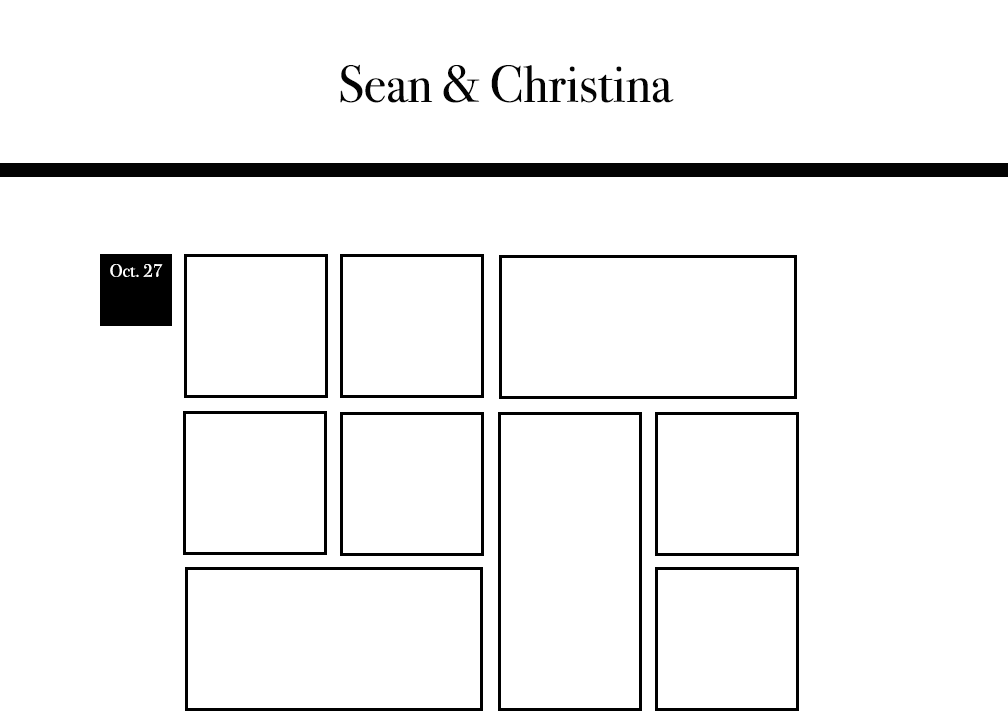
<style>
.page{position:relative;width:1008px;height:720px;background:#ffffff}
.page>*{position:absolute;margin:0}
.t1{font:52px "BodoniSvtyTwoITCTT-Book";color:#030303}
.t2{font:18px "BodoniSvtyTwoITCTT-Book";color:#ffffff}
</style>
<div class="page">
<p class="t1" style="left:340px;top:64px;width:334px;height:39px">Sean &amp; Christina</p>
<p class="t2" style="left:110px;top:264px;width:53px;height:13px">Oct. 27</p>
</div>
